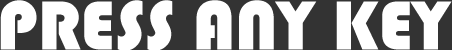
<style>
.page{position:relative;width:452px;height:50px;background:#ffffff}
.page>*{position:absolute;margin:0}
.t1{font:72px "Bauhaus93";color:#ffffff}
</style>
<div class="page">
<p class="t1" style="left:0px;top:0px;width:452px;height:51px">PRESS ANY KEY</p>
</div>
